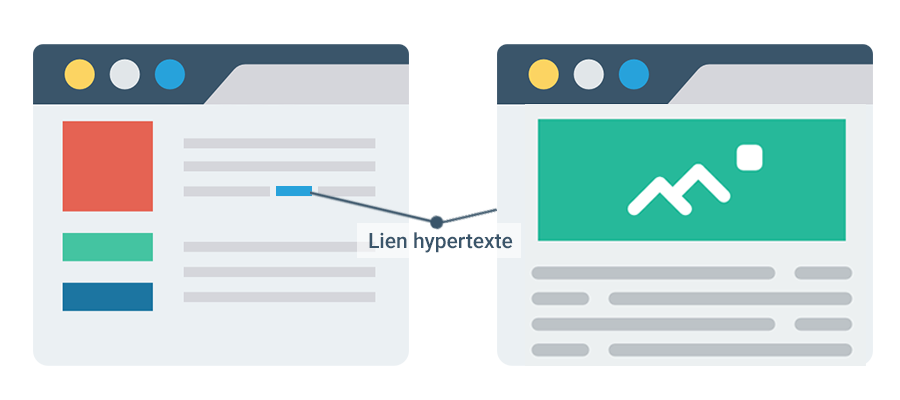
<style>
.page{position:relative;width:900px;height:400px;background:#ffffff}
.page>*{position:absolute;margin:0}
.t1{font:21px "Roboto-Medium";color:#3a556a}
</style>
<div class="page">
<p class="t1" style="left:369px;top:232px;width:144px;height:21px">Lien hypertexte</p>
</div>
